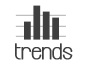
<style>
.page{position:relative;width:85px;height:63px;background:#ffffff}
.page>*{position:absolute;margin:0}
.t1{font:22.3px "Infinity";letter-spacing:-0.02em;color:#3f3f3f;font-weight:bold}
</style>
<div class="page">
<p class="t1" style="left:15px;top:43px;width:58px;height:17px">trends</p>
</div>
